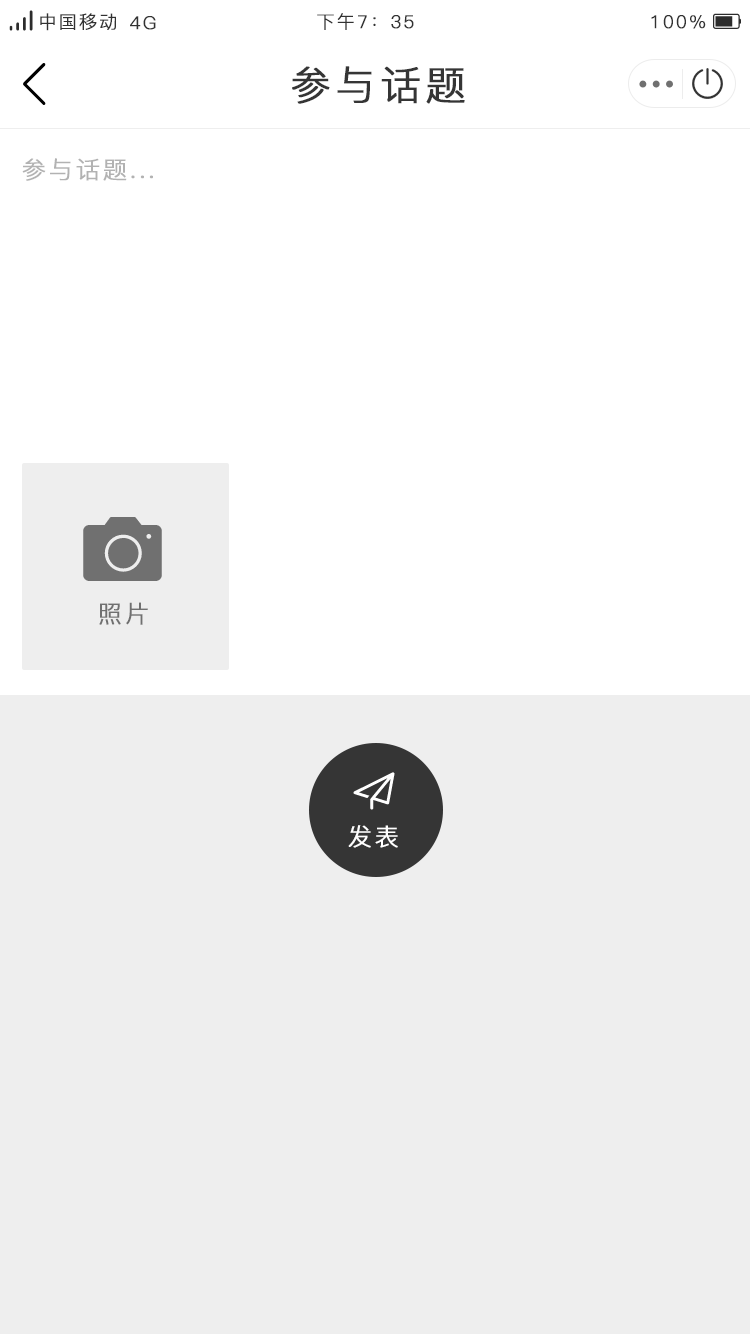
<style>
.page{position:relative;width:750px;height:1334px;background:#eeeeee}
.page>*{position:absolute;margin:0}
.t1{font:18px "PingFang-SC-Regular";letter-spacing:0.1em;color:#323232;font-weight:bold}
.t2{font:40px "PingFang-SC-Regular";letter-spacing:0.1em;color:#353535;font-weight:bold}
.t3{font:24px "PingFang-SC-Regular";letter-spacing:0.1em;color:#b2b2b2;font-weight:bold}
</style>
<div class="page">
<p class="t1" style="left:40px;top:13px;width:76px;height:18px">中国移动</p>
<p class="t1" style="left:130px;top:16px;width:26px;height:14px">4G</p>
<p class="t1" style="left:317px;top:13px;width:97px;height:17px">下午7：35</p>
<p class="t1" style="left:651px;top:15px;width:55px;height:14px">100%</p>
<p class="t2" style="left:292px;top:66px;width:173px;height:38px">参与话题</p>
<p class="t3" style="left:22px;top:158px;width:131px;height:23px">参与话题...</p>
</div>
